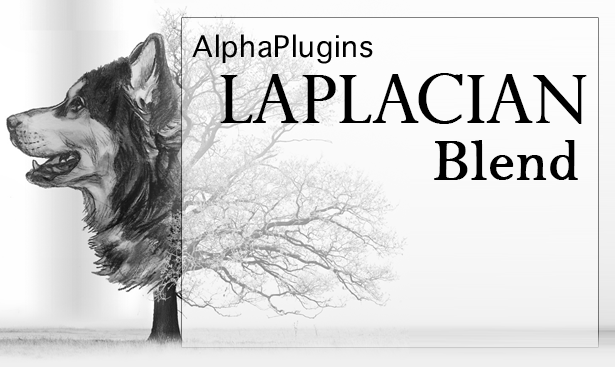
<style>
.page{position:relative;width:615px;height:367px}
.page>*{position:absolute;margin:0}
.t1{font:40.2px "AppleSymbols";letter-spacing:0.02em;color:#000000}
.t2{font:66px "PerpetuaTitlingMT-Light";color:#000000;font-weight:bold}
.t3{font:59px "BellMT";color:#000000;font-weight:bold}
</style>
<div class="page">
<p class="t1" style="left:192px;top:34px;width:181px;height:30px">AlphaPlugins</p>
<p class="t2" style="left:220px;top:73px;width:367px;height:51px">Laplacian</p>
<p class="t3" style="left:434px;top:140px;width:144px;height:40px">Blend</p>
</div>
